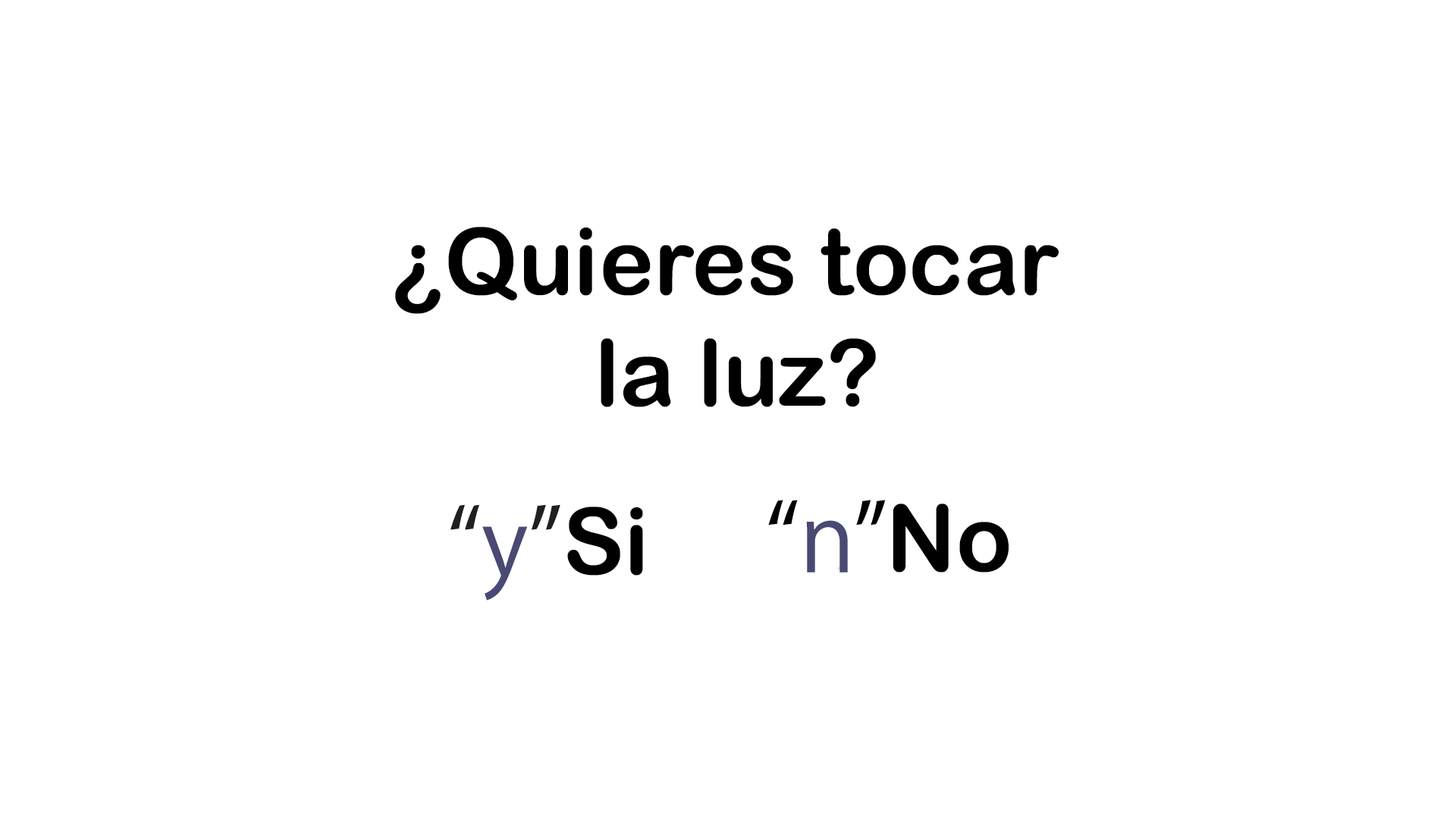
<style>
.page{position:relative;width:1456px;height:819px;background:#ffffff}
.page>*{position:absolute;margin:0}
.t1{font:92.5px "ArialRoundedMTBold";color:#000000}
.t2{font:92.5px "KozGoPr6N-Regular";color:#202020}
.t3{font:92.5px "KozGoPr6N-Regular";color:#4a4973}
.t4{font:92.5px "KozGoPr6N-Regular";color:#000000}
</style>
<div class="page">
<p class="t1" style="left:395px;top:227px;width:664px;height:180px;text-align:center">¿Quieres tocar <br>la luz?</p>
<p class="t2" style="left:450px;top:504px;width:110px;height:97px">“<span class="t3">y</span>”</p>
<p class="t1" style="left:567px;top:507px;width:76px;height:69px">Si</p>
<p class="t4" style="left:768px;top:500px;width:118px;height:73px">“<span class="t3">n</span>”</p>
<p class="t1" style="left:893px;top:504px;width:116px;height:69px">No</p>
</div>
